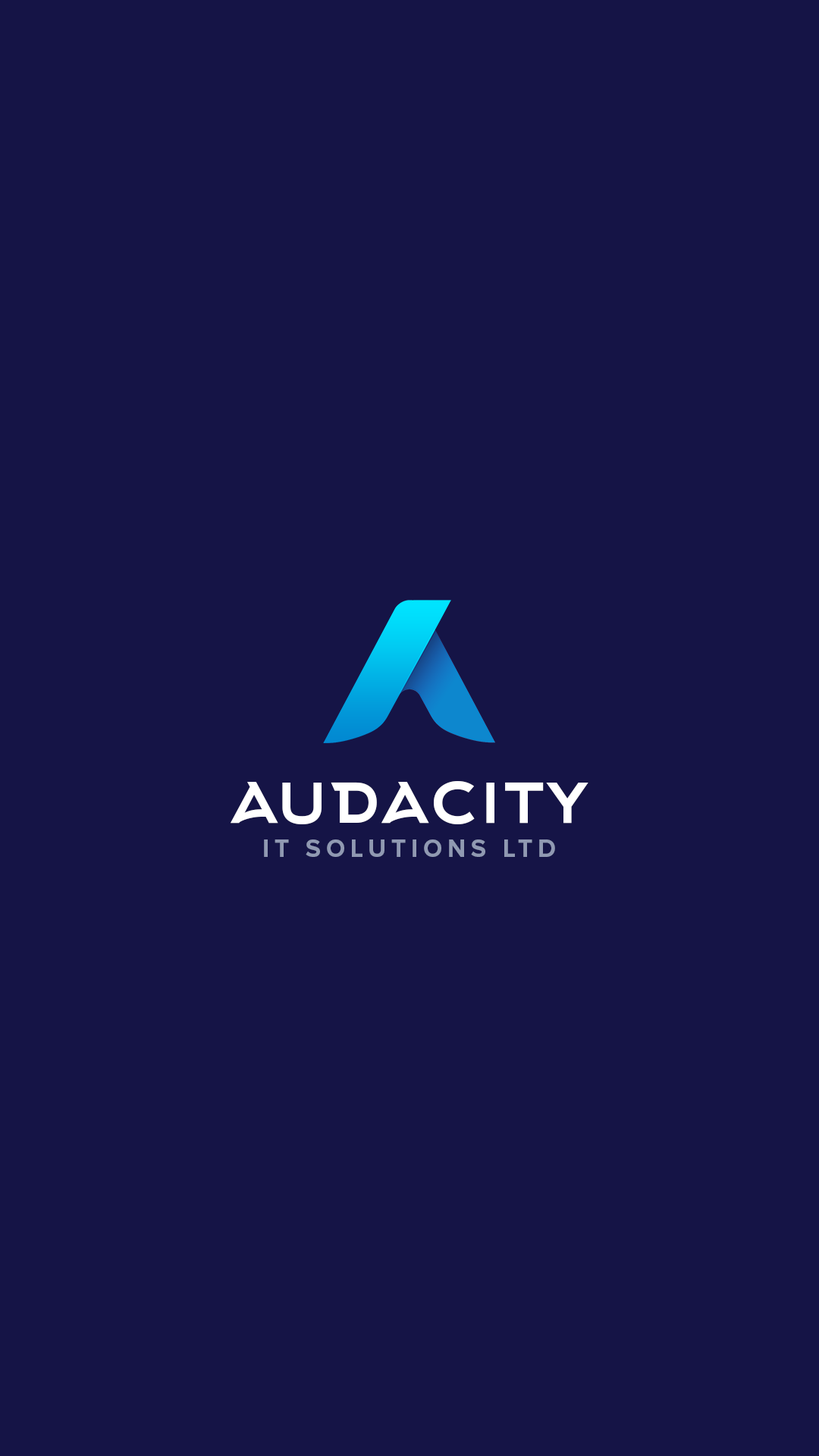
<style>
.page{position:relative;width:819px;height:1456px;background:#151446}
.page>*{position:absolute;margin:0}
.t1{font:78.3px "Arkhip";letter-spacing:-0.025em;color:#ffffff}
.t2{font:25.2px "ProximaNova-Bold";letter-spacing:0.2em;color:#9099b2;text-transform:uppercase}
</style>
<div class="page">
<p class="t1" style="left:231px;top:781px;width:357px;height:43px">audacity</p>
<p class="t2" style="left:264px;top:839px;width:291px;height:18px">it solutions ltd</p>
</div>
